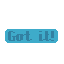
<style>
.page{position:relative;width:64px;height:64px;background:#ffffff}
.page>*{position:absolute;margin:0}
.t1{font:14px "Superscript";color:#3281a2}
</style>
<div class="page">
<p class="t1" style="left:8px;top:31px;width:46px;height:10px">Got it!</p>
</div>
